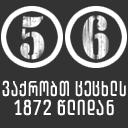
<style>
.page{position:relative;width:128px;height:128px;background:#333333}
.page>*{position:absolute;margin:0}
.t1{font:21.6px "ArchyEDT-Bold";letter-spacing:0.06em;color:#ffffff;scale:0.78 1}
.t2{font:21.6px "ArchyEDT-Bold";letter-spacing:0.06em;color:#ffffff;scale:0.89 1}
</style>
<div class="page">
<p class="t1" style="left:2px;top:80px;width:124px;height:17px">ვაქრობთ ცეცხლს</p>
<p class="t2" style="left:14px;top:99px;width:100px;height:17px">1872 წლიდან</p>
</div>
